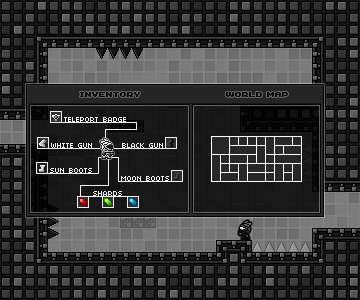
<style>
.page{position:relative;width:360px;height:300px}
.page>*{position:absolute;margin:0}
.t1{font:8px "04b11";color:#151515}
.t2{font:8px "04b03";color:#efefef}
</style>
<div class="page">
<p class="t1" style="left:80px;top:92px;width:60px;height:5px">INVENTORY</p>
<p class="t1" style="left:226px;top:92px;width:62px;height:5px">WORLD MAP</p>
<p class="t2" style="left:64px;top:117px;width:62px;height:5px">TELEPORT BADGE</p>
<p class="t2" style="left:51px;top:143px;width:41px;height:5px">WHITE GUN</p>
<p class="t2" style="left:122px;top:143px;width:41px;height:5px">BLACK GUN</p>
<p class="t2" style="left:50px;top:168px;width:42px;height:5px">SUN BOOTS</p>
<p class="t2" style="left:121px;top:176px;width:48px;height:5px">MOON BOOTS</p>
<p class="t2" style="left:93px;top:191px;width:29px;height:5px">SHARDS</p>
</div>
